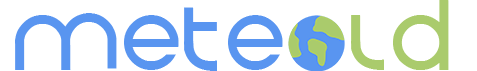
<style>
.page{position:relative;width:477px;height:71px;background:#ffffff}
.page>*{position:absolute;margin:0}
.t1{font:80px "Edition";color:#5995f0;text-transform:uppercase}
.t2{font:80px "Edition";color:#d79800;text-transform:uppercase}
.t3{font:80px "Edition";color:#aacb6c;text-transform:uppercase}
</style>
<div class="page">
<p class="t1" style="left:15px;top:0px;width:434px;height:71px">mete<span class="t2">o</span><span class="t3">ld</span></p>
</div>
